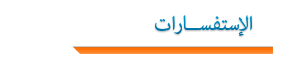
<style>
.page{position:relative;width:282px;height:69px;background:#ffffff}
.page>*{position:absolute;margin:0}
.t1{font:28px "AdobeArabic-Regular";color:#0078ab}
</style>
<div class="page">
<p class="t1" style="left:155px;top:15px;width:97px;height:21px">الإستفســارات</p>
</div>
